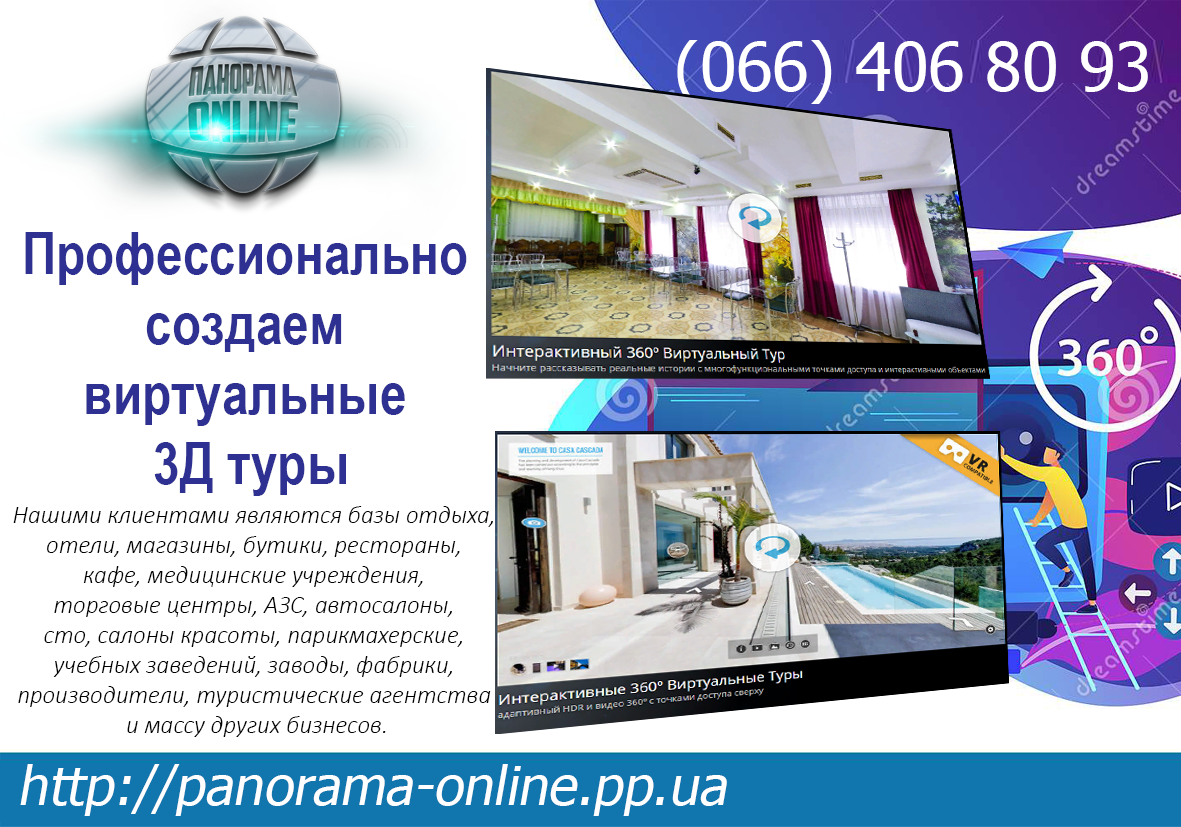
<style>
.page{position:relative;width:1181px;height:827px;background:#ffffff}
.page>*{position:absolute;margin:0}
.t1{font:66.7px "Tahoma";color:#ffffff}
.t2{font:58.3px "ArialNarrow-Bold";color:#2e3192}
.t3{font:25px "Calibri-LightItalic";color:#000000}
.t4{font:54.2px "Tahoma";color:#ffffff;font-style:italic}
</style>
<div class="page">
<p class="t1" style="left:677px;top:40px;width:471px;height:64px">(066) 406 80 93</p>
<p class="t2" style="left:25px;top:232px;width:442px;height:264px;text-align:center">Профессионально <br>создаем <br>виртуальные <br>3Д туры</p>
<p class="t3" style="left:13px;top:506px;width:480px;height:231px;text-align:center">Нашими клиентами являются базы отдыха, <br>отели, магазины, бутики, рестораны, <br>кафе, медицинские учреждения, <br>торговые центры, АЗС, автосалоны, <br>сто, салоны красоты, парикмахерские, <br>учебных заведений, заводы, фабрики, <br>производители, туристические агентства <br>и массу других бизнесов.</p>
<p class="t4" style="left:20px;top:764px;width:707px;height:52px">http://panorama-online.pp.ua</p>
</div>
